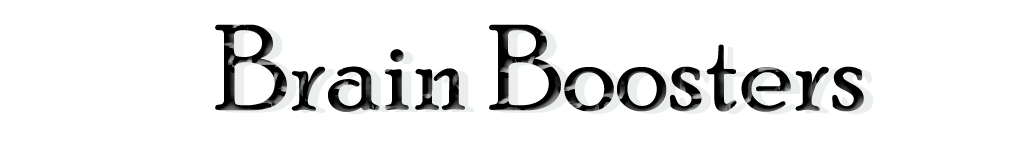
<style>
.page{position:relative;width:1024px;height:150px;background:#ffffff}
.page>*{position:absolute;margin:0}
.t1{font:120px "PoorRichard-Regular";color:#000000}
.t2{font:60px "LucidaCalligraphy-Italic";color:#000000}
</style>
<div class="page">
<p class="t1" style="left:215px;top:24px;width:649px;height:88px"><span class="t2"><br>              </span>Brain Boosters</p>
</div>
